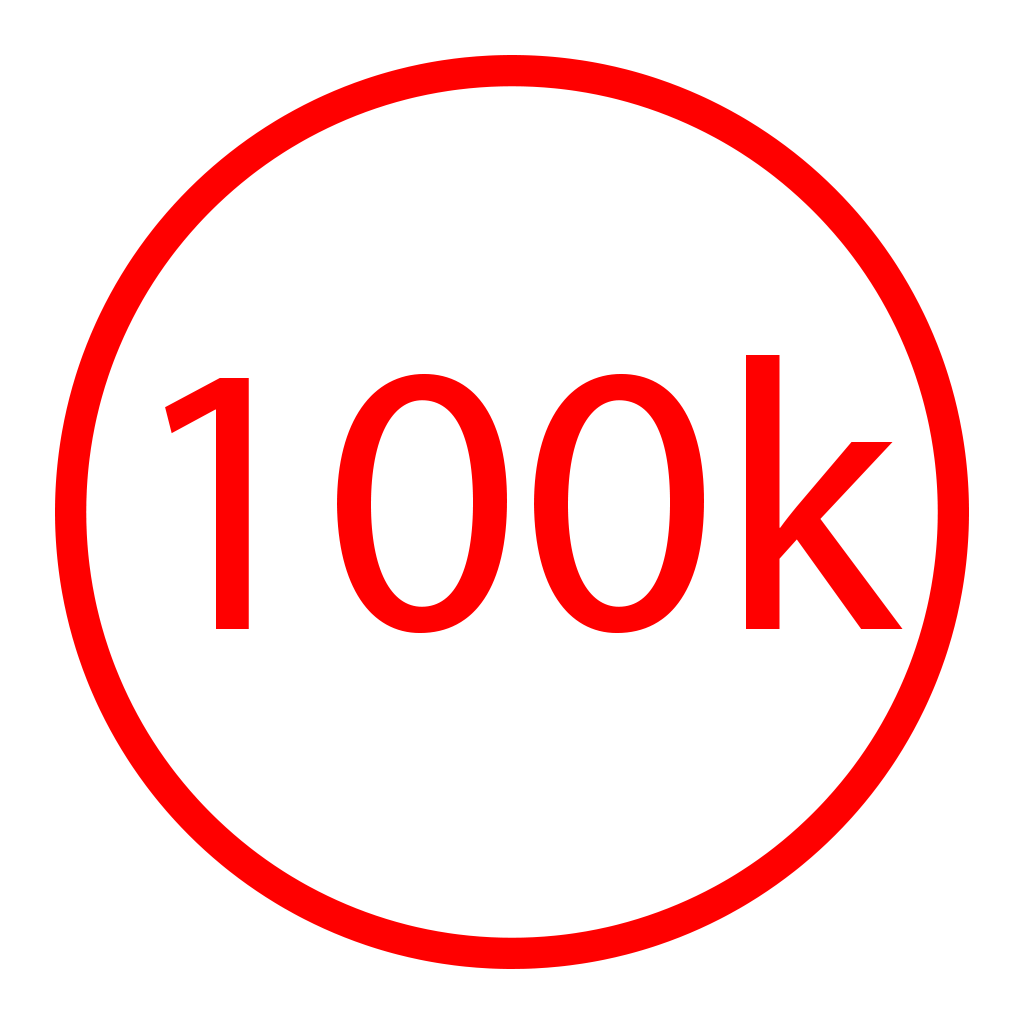
<style>
.page{position:relative;width:1024px;height:1024px;background:#ffffff}
.page>*{position:absolute;margin:0}
.t1{font:385.4px "MyriadPro-Regular";color:#ff0000}
</style>
<div class="page">
<p class="t1" style="left:165px;top:355px;width:738px;height:278px">100k</p>
</div>
